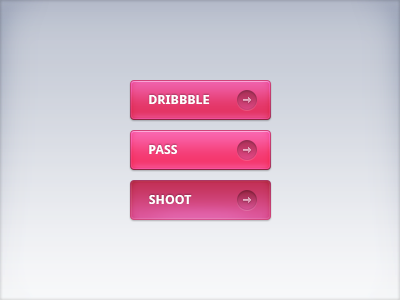
<style>
.page{position:relative;width:400px;height:300px}
.page>*{position:absolute;margin:0}
.t1{font:13px "DroidSans-Bold";color:#ffffff;text-transform:uppercase}
</style>
<div class="page">
<p class="t1" style="left:149px;top:95px;width:61px;height:9px">DRIBBBLE</p>
<p class="t1" style="left:149px;top:145px;width:29px;height:9px">PASS</p>
<p class="t1" style="left:149px;top:195px;width:43px;height:9px">SHOOT</p>
</div>
